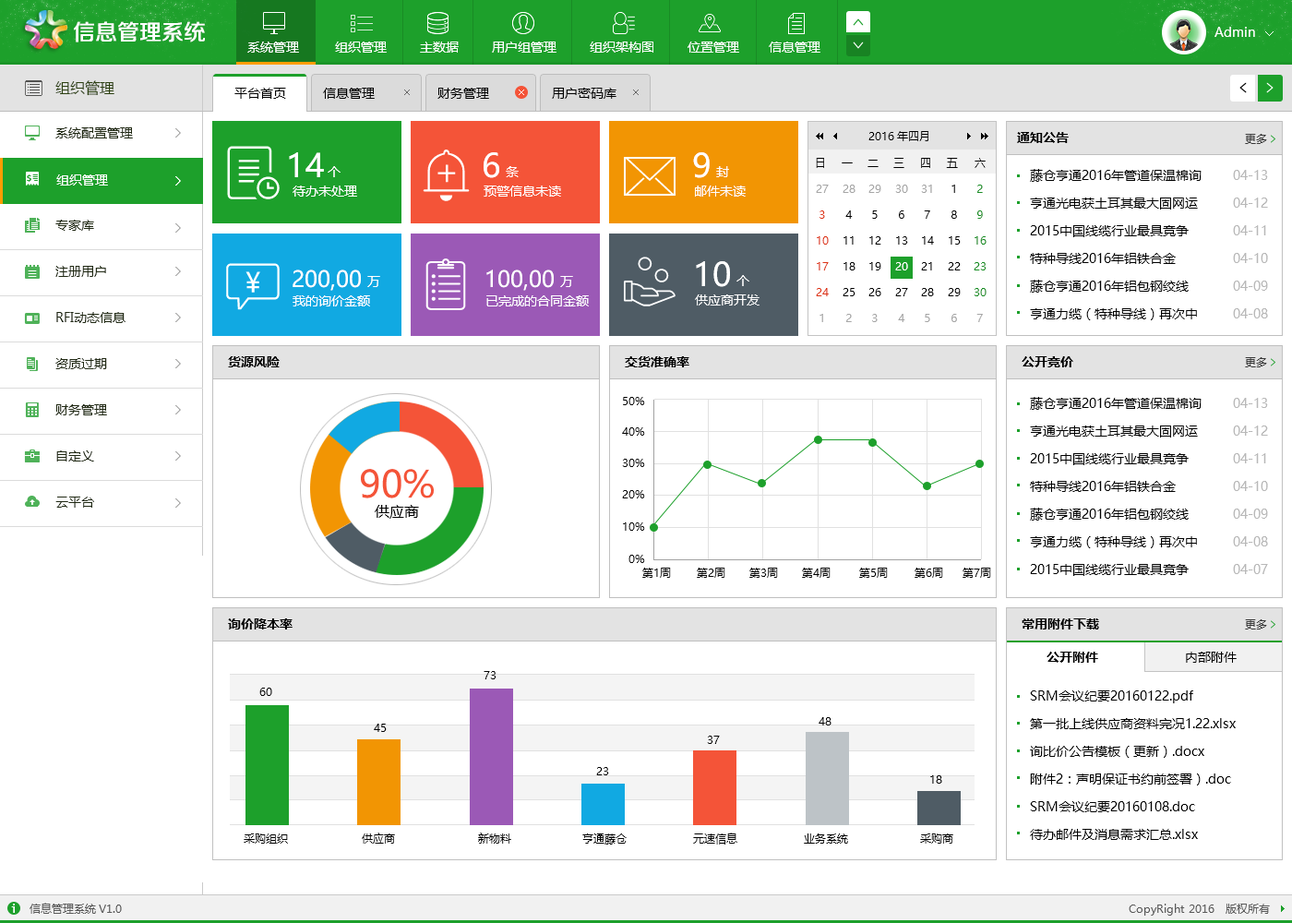
<style>
.page{position:relative;width:1292px;height:923px;background:#ffffff}
.page>*{position:absolute;margin:0}
.t1{font:11.1px "MicrosoftYaHei";color:#000000}
.t2{font:12.9px "MicrosoftYaHei-Bold";color:#000000}
.t3{font:11.1px "MicrosoftYaHei";color:#383838}
.t4{font:32.3px "MicrosoftYaHei";color:#ffffff}
.t5{font:12.9px "MicrosoftYaHei";color:#ffffff}
.t6{font:12.9px/27.7px "MicrosoftYaHei";color:#000000}
.t7{font:12.9px/27.7px "MicrosoftYaHei";color:#b8b8b8}
.t8{font:11.1px/25.8px "MicrosoftYaHei";color:#de3618}
.t9{font:11.1px/25.8px "MicrosoftYaHei";color:#a6a6a6}
.t10{font:11.1px/25.8px "MicrosoftYaHei";color:#000000}
.t11{font:11.1px/25.8px "MicrosoftYaHei";color:#ffffff}
.t12{font:11.1px/25.8px "MicrosoftYaHei";color:#198f25}
.t13{font:22.1px "MicrosoftYaHei";color:#ffffff}
.t14{font:37.1px "MicrosoftYaHei";color:#f45438}
.t15{font:14.8px "MicrosoftYaHei";color:#000000}
.t16{font:12.9px "MicrosoftYaHei";color:#000000}
</style>
<div class="page">
<p class="t1" style="left:868px;top:131px;width:60px;height:10px">2016年四月</p>
<p class="t2" style="left:1017px;top:132px;width:52px;height:11px">通知公告</p>
<p class="t3" style="left:1245px;top:134px;width:22px;height:10px">更多</p>
<p class="t4" style="left:289px;top:152px;width:35px;height:25px">14</p>
<p class="t4" style="left:484px;top:152px;width:15px;height:26px">6</p>
<p class="t4" style="left:693px;top:152px;width:17px;height:26px">9</p>
<p class="t1" style="left:816px;top:158px;width:8px;height:10px">日</p>
<p class="t1" style="left:868px;top:160px;width:11px;height:7px">二</p>
<p class="t1" style="left:893px;top:158px;width:11px;height:10px">三</p>
<p class="t1" style="left:921px;top:158px;width:9px;height:10px">四</p>
<p class="t1" style="left:946px;top:158px;width:12px;height:10px">五</p>
<p class="t1" style="left:975px;top:158px;width:11px;height:10px">六</p>
<p class="t5" style="left:328px;top:166px;width:13px;height:11px">个</p>
<p class="t5" style="left:506px;top:166px;width:13px;height:11px">条</p>
<p class="t5" style="left:716px;top:166px;width:13px;height:11px">封</p>
<p class="t1" style="left:842px;top:162px;width:11px;height:1px">一</p>
<p class="t6" style="left:1030px;top:169px;width:172px;height:151px">藤仓亨通2016年管道保温棉询<br>亨通光电获土耳其最大固网运<br>2015中国线缆行业最具竞争<br>特种导线2016年铝铁合金<br>藤仓亨通2016年铝包钢绞线<br>亨通力缆（特种导线）再次中</p>
<p class="t7" style="left:1233px;top:170px;width:35px;height:148px">04-13<br>04-12<br>04-11<br>04-10<br>04-09<br>04-08</p>
<p class="t5" style="left:293px;top:186px;width:64px;height:11px">待办未处理</p>
<p class="t5" style="left:484px;top:186px;width:77px;height:11px">预警信息未读</p>
<p class="t5" style="left:695px;top:186px;width:51px;height:11px">邮件未读</p>
<p class="t8" style="left:816px;top:185px;width:13px;height:137px;text-align:center"><span class="t9">27<br></span>3<br>10<br>17<br>24<br><span class="t9">1</span></p>
<p class="t10" style="left:843px;top:185px;width:13px;height:137px;text-align:center"><span class="t9">28<br></span>4<br>11<br>18<br>25<br><span class="t9">2</span></p>
<p class="t10" style="left:868px;top:185px;width:13px;height:137px;text-align:center"><span class="t9">29<br></span>5<br>12<br>19<br>26<br><span class="t9">3</span></p>
<p class="t10" style="left:895px;top:185px;width:13px;height:137px;text-align:center"><span class="t9">30<br></span>6<br>13<br><span class="t11">20<br></span>27<br><span class="t9">4</span></p>
<p class="t10" style="left:921px;top:185px;width:13px;height:137px;text-align:center"><span class="t9">31<br></span>7<br>14<br>21<br>28<br><span class="t9">5</span></p>
<p class="t10" style="left:948px;top:185px;width:13px;height:137px;text-align:center">1<br>8<br>15<br>22<br>29<br><span class="t9">6</span></p>
<p class="t12" style="left:974px;top:185px;width:13px;height:137px;text-align:center">2<br>9<br>16<br>23<br>30<br><span class="t9">7</span></p>
<p class="t13" style="left:293px;top:269px;width:68px;height:22px">200,00</p>
<p class="t13" style="left:486px;top:269px;width:68px;height:22px">100,00</p>
<p class="t4" style="left:696px;top:261px;width:34px;height:26px">10</p>
<p class="t5" style="left:367px;top:276px;width:13px;height:11px">万</p>
<p class="t5" style="left:560px;top:276px;width:13px;height:11px">万</p>
<p class="t5" style="left:736px;top:275px;width:13px;height:11px">个</p>
<p class="t5" style="left:293px;top:295px;width:77px;height:11px">我的询价金额</p>
<p class="t5" style="left:486px;top:295px;width:103px;height:11px">已完成的合同金额</p>
<p class="t5" style="left:695px;top:294px;width:65px;height:11px">供应商开发</p>
<p class="t2" style="left:228px;top:356px;width:52px;height:11px">货源风险</p>
<p class="t2" style="left:625px;top:356px;width:64px;height:11px">交货准确率</p>
<p class="t2" style="left:1022px;top:356px;width:51px;height:11px">公开竞价</p>
<p class="t3" style="left:1245px;top:357px;width:22px;height:10px">更多</p>
<p class="t1" style="left:623px;top:397px;width:22px;height:8px">50%</p>
<p class="t6" style="left:1030px;top:397px;width:172px;height:179px">藤仓亨通2016年管道保温棉询<br>亨通光电获土耳其最大固网运<br>2015中国线缆行业最具竞争<br>特种导线2016年铝铁合金<br>藤仓亨通2016年铝包钢绞线<br>亨通力缆（特种导线）再次中<br>2015中国线缆行业最具竞争</p>
<p class="t7" style="left:1233px;top:398px;width:35px;height:176px">04-13<br>04-12<br>04-11<br>04-10<br>04-09<br>04-08<br>04-07</p>
<p class="t1" style="left:622px;top:427px;width:23px;height:9px">40%</p>
<p class="t1" style="left:622px;top:459px;width:23px;height:8px">30%</p>
<p class="t14" style="left:361px;top:469px;width:73px;height:29px">90%</p>
<p class="t1" style="left:622px;top:490px;width:23px;height:8px">20%</p>
<p class="t15" style="left:375px;top:505px;width:44px;height:14px">供应商</p>
<p class="t1" style="left:623px;top:522px;width:22px;height:9px">10%</p>
<p class="t1" style="left:628px;top:555px;width:17px;height:8px">0%</p>
<p class="t1" style="left:642px;top:568px;width:29px;height:10px">第1周</p>
<p class="t1" style="left:697px;top:568px;width:28px;height:10px">第2周</p>
<p class="t1" style="left:749px;top:568px;width:29px;height:10px">第3周</p>
<p class="t1" style="left:802px;top:568px;width:29px;height:10px">第4周</p>
<p class="t1" style="left:859px;top:568px;width:29px;height:10px">第5周</p>
<p class="t1" style="left:915px;top:568px;width:28px;height:10px">第6周</p>
<p class="t1" style="left:963px;top:568px;width:28px;height:10px">第7周</p>
<p class="t2" style="left:228px;top:618px;width:65px;height:11px">询价降本率</p>
<p class="t2" style="left:1022px;top:618px;width:77px;height:11px">常用附件下载</p>
<p class="t3" style="left:1245px;top:619px;width:22px;height:10px">更多</p>
<p class="t2" style="left:1047px;top:652px;width:51px;height:11px">公开附件</p>
<p class="t16" style="left:1186px;top:652px;width:51px;height:11px">内部附件</p>
<p class="t1" style="left:484px;top:671px;width:13px;height:8px">73</p>
<p class="t1" style="left:259px;top:688px;width:13px;height:8px">60</p>
<p class="t6" style="left:1030px;top:690px;width:206px;height:150px">SRM会议纪要20160122.pdf <br>第一批上线供应商资料完况1.22.xlsx<br>询比价公告模板（更新）.docx <br>附件2：声明保证书约前签署）.doc <br>SRM会议纪要20160108.doc <br>待办邮件及消息需求汇总.xlsx</p>
<p class="t1" style="left:374px;top:724px;width:13px;height:8px">45</p>
<p class="t1" style="left:819px;top:717px;width:13px;height:8px">48</p>
<p class="t1" style="left:707px;top:736px;width:13px;height:8px">37</p>
<p class="t1" style="left:596px;top:767px;width:13px;height:8px">23</p>
<p class="t1" style="left:930px;top:775px;width:12px;height:9px">18</p>
<p class="t1" style="left:244px;top:833px;width:44px;height:11px">采购组织</p>
<p class="t1" style="left:362px;top:832px;width:33px;height:12px">供应商</p>
<p class="t1" style="left:478px;top:832px;width:33px;height:12px">新物料</p>
<p class="t1" style="left:582px;top:833px;width:45px;height:11px">亨通藤仓</p>
<p class="t1" style="left:693px;top:832px;width:44px;height:12px">元速信息</p>
<p class="t1" style="left:804px;top:833px;width:44px;height:11px">业务系统</p>
<p class="t1" style="left:920px;top:833px;width:33px;height:11px">采购商</p>
</div>
